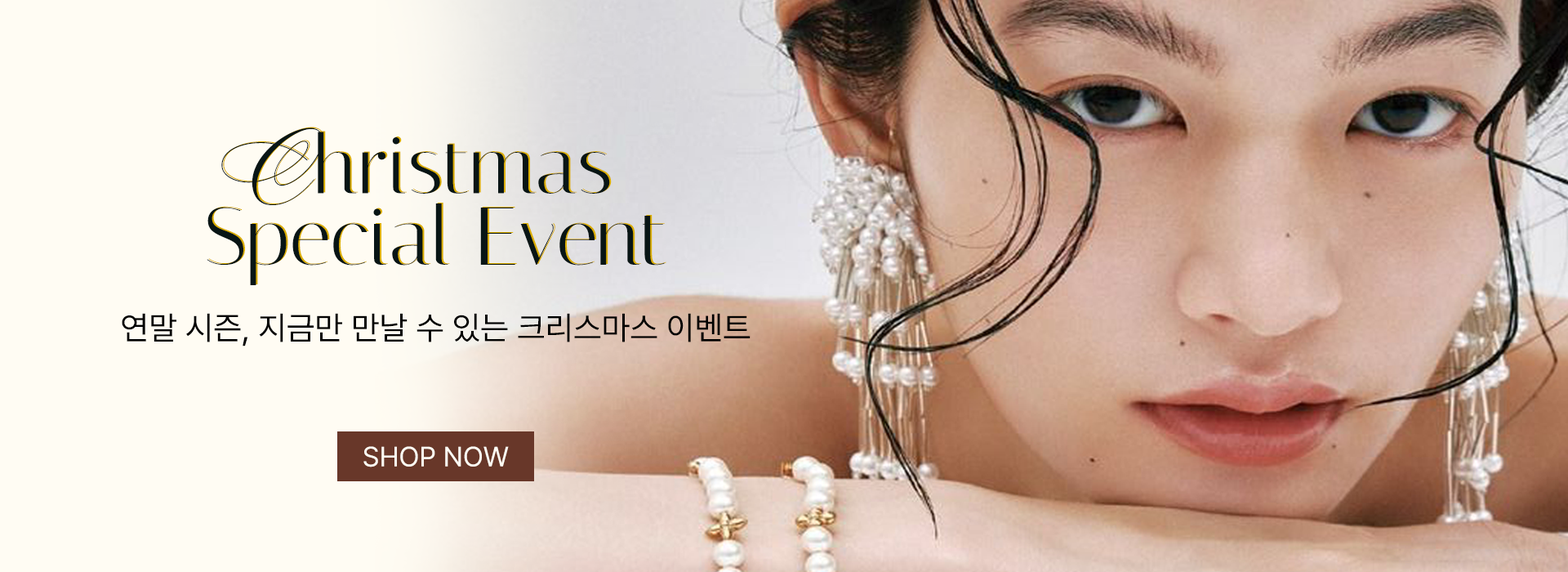
<style>
.page{position:relative;width:1568px;height:572px;background:#fffcf3}
.page>*{position:absolute;margin:0}
.t1{font:81.7px/92.3px "Italiana-Regular";color:#081515}
.t2{font:81.7px/92.3px "Ballet-Regular";color:#081515}
.t3{font:81.7px/92.3px "Italiana-Regular"}
.t4{font:81.7px/92.3px "Ballet-Regular"}
.t5{font:32.7px "Pretendard-Regular";color:#000000}
.t6{font:27.8px "Pretendard-Regular";color:#fffcf3}
</style>
<div class="page">
<p class="t1" style="left:207px;top:127px;width:458px;height:158px;text-align:center"><span class="t2">C</span>hristmas <br>Special Event</p>
<p class="t3" style="left:208px;top:127px;width:458px;height:157px;text-align:center"><span class="t4">C</span>hristmas <br>Special Event</p>
<p class="t5" style="left:122px;top:313px;width:629px;height:33px">연말 시즌, 지금만 만날 수 있는 크리스마스 이벤트</p>
<p class="t6" style="left:363px;top:446px;width:146px;height:21px">SHOP NOW</p>
</div>
